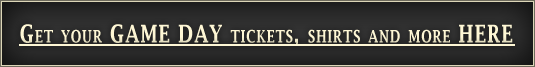
<style>
.page{position:relative;width:535px;height:67px}
.page>*{position:absolute;margin:0}
.t1{font:24.6px "LucidaFax-Demi";letter-spacing:0.05em;color:#fef7d5;font-variant:small-caps;scale:0.76 1}
</style>
<div class="page">
<p class="t1" style="left:20px;top:24px;width:493px;height:22px">Get your GAME DAY tickets, shirts and more HERE</p>
</div>
